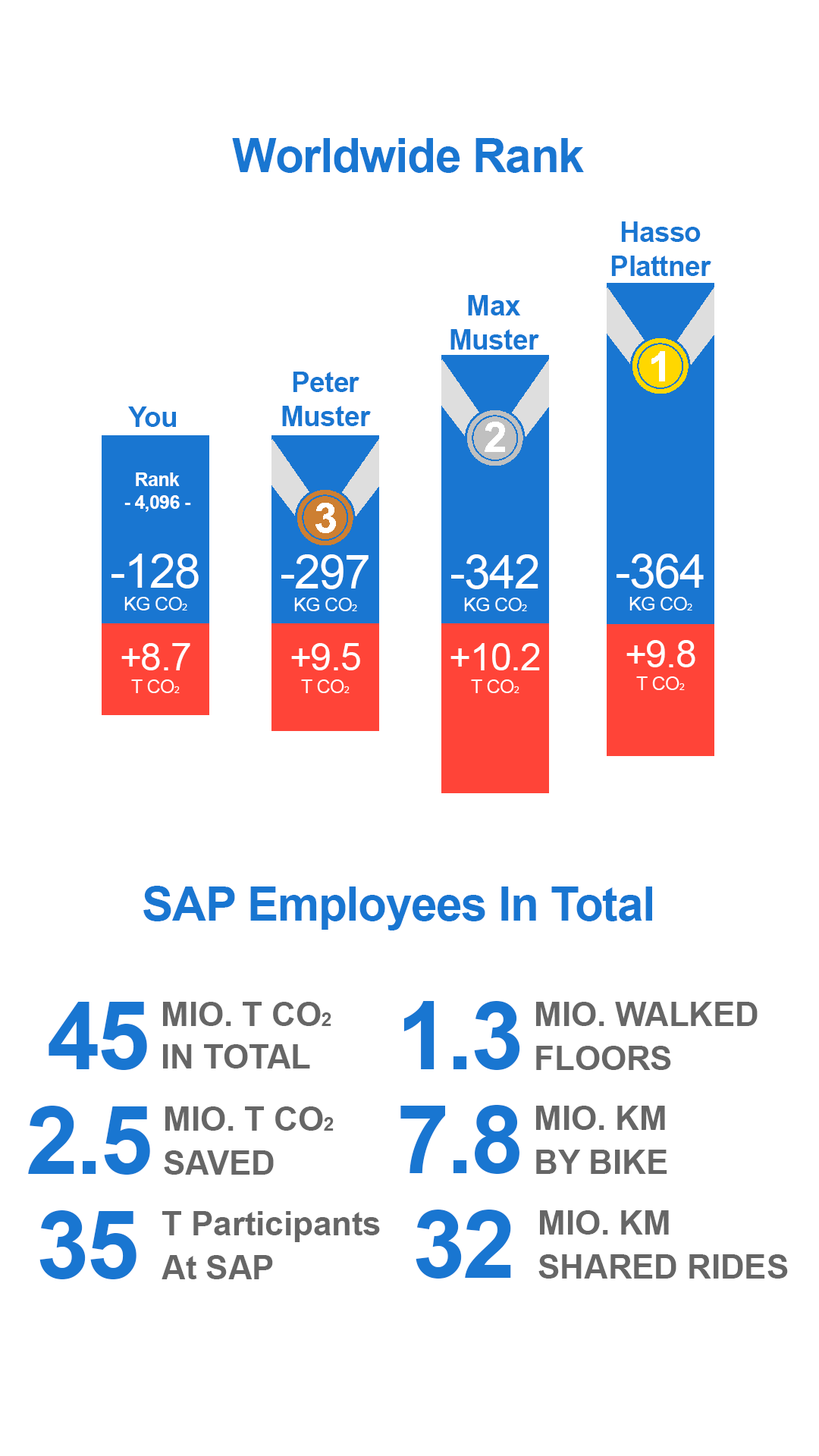
<style>
.page{position:relative;width:819px;height:1456px;background:#ffffff}
.page>*{position:absolute;margin:0}
.t1{font:47.4px "Arial-BoldMT";letter-spacing:-0.025em;color:#1976d1}
.t2{font:28.4px "Arial-BoldMT";letter-spacing:-0.025em;color:#1976d1}
.t3{font:19px "Arial-BoldMT";letter-spacing:-0.025em;color:#ffffff}
.t4{font:19px "ArialMT";letter-spacing:-0.025em;color:#ffffff}
.t5{font:47.4px "ArialMT";letter-spacing:-0.025em;color:#ffffff}
.t6{font:9.5px "ArialMT";letter-spacing:-0.025em;color:#ffffff}
.t7{font:37.9px "ArialMT";letter-spacing:-0.025em;color:#ffffff}
.t8{font:94.8px "Arial-BoldMT";letter-spacing:-0.025em;color:#1976d1}
.t9{font:33.2px "Arial-BoldMT";color:#666666}
.t10{font:19px "Arial-BoldMT";color:#666666}
</style>
<div class="page">
<p class="t1" style="left:232px;top:138px;width:352px;height:35px">Worldwide Rank</p>
<p class="t2" style="left:611px;top:221px;width:100px;height:55px;text-align:center">Hasso <br>Plattner</p>
<p class="t2" style="left:450px;top:295px;width:89px;height:55px;text-align:center">Max<br>Muster</p>
<p class="t2" style="left:282px;top:372px;width:89px;height:54px;text-align:center">Peter<br>Muster</p>
<p class="t2" style="left:128px;top:406px;width:48px;height:21px">You</p>
<p class="t3" style="left:124px;top:472px;width:67px;height:40px;text-align:center">Rank<br>- 4,096 -</p>
<p class="t4" style="left:111px;top:554px;width:88px;height:56px;text-align:center"><span class="t5">-128<br></span>KG CO<span class="t6">2</span></p>
<p class="t4" style="left:281px;top:554px;width:88px;height:57px;text-align:center"><span class="t5">-297<br></span>KG CO<span class="t6">2</span></p>
<p class="t4" style="left:451px;top:554px;width:87px;height:57px;text-align:center"><span class="t5">-342<br></span>KG CO<span class="t6">2</span></p>
<p class="t4" style="left:617px;top:554px;width:87px;height:56px;text-align:center"><span class="t5">-364<br></span>KG CO<span class="t6">2</span></p>
<p class="t7" style="left:626px;top:640px;width:69px;height:50px;text-align:center">+9.8<br><span class="t4">T CO</span><span class="t6">2</span></p>
<p class="t7" style="left:121px;top:643px;width:69px;height:50px;text-align:center">+8.7<br><span class="t4">T CO</span><span class="t6">2</span></p>
<p class="t7" style="left:291px;top:643px;width:69px;height:50px;text-align:center">+9.5<br><span class="t4">T CO</span><span class="t6">2</span></p>
<p class="t7" style="left:450px;top:643px;width:90px;height:50px;text-align:center">+10.2<br><span class="t4">T CO</span><span class="t6">2</span></p>
<p class="t1" style="left:143px;top:886px;width:509px;height:44px">SAP Employees In Total</p>
<p class="t8" style="left:49px;top:1002px;width:98px;height:68px">45</p>
<p class="t9" style="left:163px;top:1002px;width:168px;height:66px">MIO. T CO<span class="t10">2<br></span>IN TOTAL</p>
<p class="t8" style="left:403px;top:1001px;width:117px;height:69px">1.3</p>
<p class="t9" style="left:536px;top:1002px;width:222px;height:68px">MIO. WALKED<br>FLOORS</p>
<p class="t8" style="left:28px;top:1106px;width:122px;height:69px">2.5</p>
<p class="t9" style="left:164px;top:1106px;width:170px;height:69px">MIO. T CO<span class="t10">2<br></span>SAVED</p>
<p class="t8" style="left:400px;top:1105px;width:119px;height:69px">7.8</p>
<p class="t9" style="left:536px;top:1106px;width:131px;height:68px">MIO. KM<br>BY BIKE</p>
<p class="t8" style="left:39px;top:1210px;width:97px;height:69px">35</p>
<p class="t9" style="left:162px;top:1211px;width:218px;height:68px">T Participants<br>At SAP</p>
<p class="t8" style="left:416px;top:1210px;width:95px;height:69px">32</p>
<p class="t9" style="left:538px;top:1210px;width:250px;height:69px">MIO. KM<br>SHARED RIDES</p>
</div>
